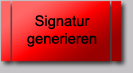
<style>
.page{position:relative;width:133px;height:73px}
.page>*{position:absolute;margin:0}
.t1{font:14.7px "ArialMT";color:#000000}
</style>
<div class="page">
<p class="t1" style="left:27px;top:15px;width:70px;height:32px;text-align:center">Signatur<br>generieren</p>
</div>
